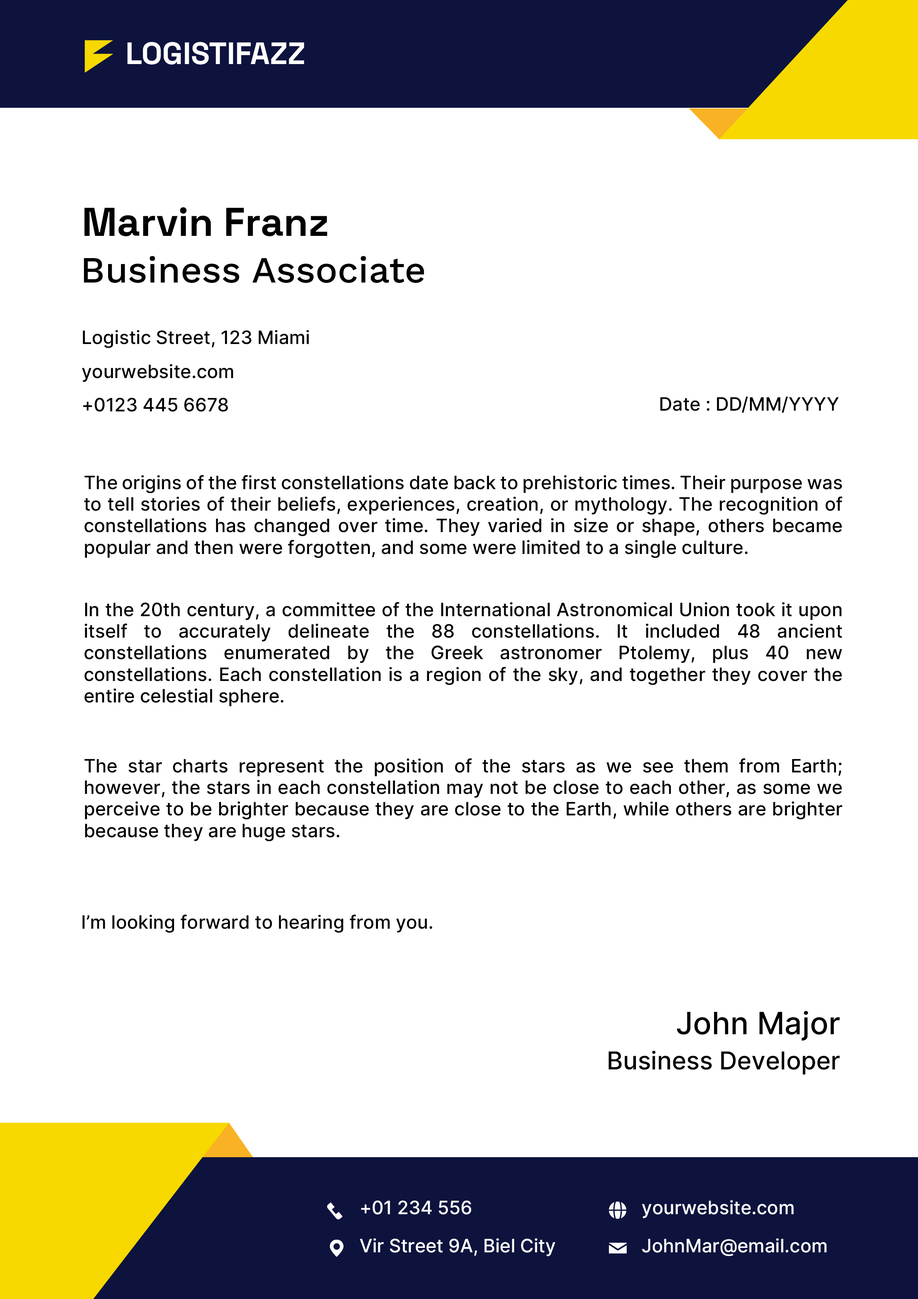
<style>
.page{position:relative;width:918px;height:1299px;background:#ffffff}
.page>*{position:absolute;margin:0}
.t1{font:30.9px "SpaceGrotesk-Bold";color:#ffffff}
.t2{font:40.1px "SpaceGrotesk-Bold";color:#000000}
.t3{font:37px "WorkSans-Medium";color:#000000}
.t4{font:18.5px "Inter-Medium";color:#000000}
.t5{font:18.5px/21.6px "Inter-Medium";color:#000000}
.t6{font:30.9px "Inter-Medium";color:#000000}
.t7{font:24.7px "Inter-Medium";color:#000000}
.t8{font:18.5px "Inter-Medium";color:#ffffff}
</style>
<div class="page">
<p class="t1" style="left:127px;top:42px;width:177px;height:23px">LOGISTIFAZZ</p>
<p class="t2" style="left:84px;top:207px;width:243px;height:30px">Marvin Franz</p>
<p class="t3" style="left:84px;top:256px;width:340px;height:27px">Business Associate</p>
<p class="t4" style="left:83px;top:330px;width:226px;height:18px">Logistic Street, 123 Miami</p>
<p class="t4" style="left:82px;top:364px;width:151px;height:18px">yourwebsite.com</p>
<p class="t4" style="left:83px;top:398px;width:145px;height:14px">+0123 445 6678</p>
<p class="t4" style="left:660px;top:397px;width:179px;height:16px">Date : DD/MM/YYYY</p>
<p class="t5" style="left:84px;top:475px;width:759px;height:83px;text-align:justify">The origins of the first constellations date back to prehistoric times. Their purpose was to tell stories of their beliefs, experiences, creation, or mythology. The recognition of constellations has changed over time. They varied in size or shape, others became popular and then were forgotten, and some were limited to a single culture.</p>
<p class="t5" style="left:84px;top:602px;width:758px;height:104px;text-align:justify">In the 20th century, a committee of the International Astronomical Union took it upon itself to accurately delineate the 88 constellations. It included 48 ancient constellations enumerated by the Greek astronomer Ptolemy, plus 40 new constellations. Each constellation is a region of the sky, and together they cover the entire celestial sphere.</p>
<p class="t5" style="left:84px;top:758px;width:759px;height:83px;text-align:justify">The star charts represent the position of the stars as we see them from Earth; however, the stars in each constellation may not be close to each other, as some we perceive to be brighter because they are close to the Earth, while others are brighter because they are huge stars.</p>
<p class="t4" style="left:83px;top:914px;width:349px;height:19px">I’m looking forward to hearing from you.</p>
<p class="t6" style="left:677px;top:1011px;width:163px;height:29px">John Major</p>
<p class="t7" style="left:609px;top:1050px;width:231px;height:24px">Business Developer</p>
<p class="t8" style="left:361px;top:1200px;width:110px;height:14px">+01 234 556</p>
<p class="t8" style="left:642px;top:1200px;width:152px;height:18px">yourwebsite.com</p>
<p class="t8" style="left:360px;top:1238px;width:195px;height:18px">Vir Street 9A, Biel City</p>
<p class="t8" style="left:642px;top:1238px;width:185px;height:18px">JohnMar@email.com</p>
</div>
